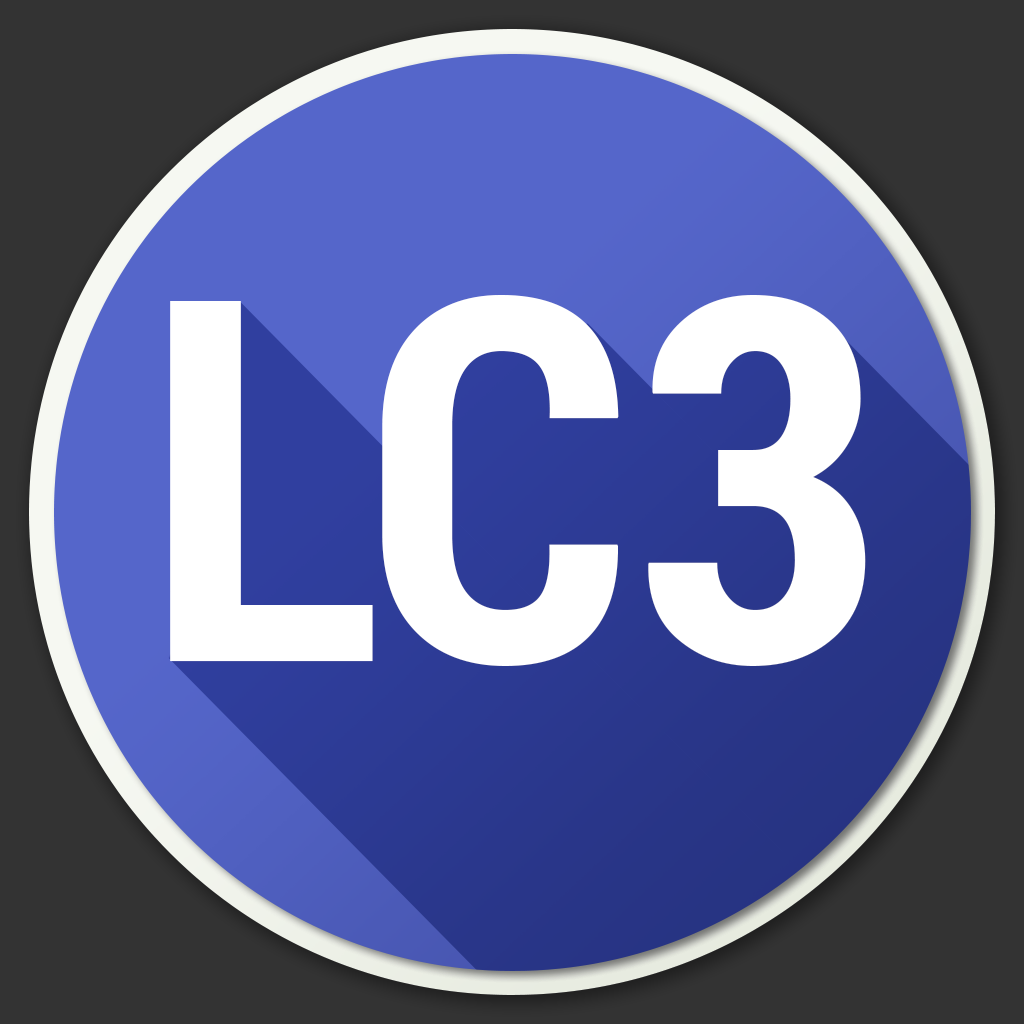
<style>
.page{position:relative;width:1024px;height:1024px;background:#333333}
.page>*{position:absolute;margin:0}
.t1{font:507.1px "RobotoCondensed-Bold";color:#ffffff}
</style>
<div class="page">
<p class="t1" style="left:170px;top:295px;width:696px;height:371px">LC3</p>
</div>
